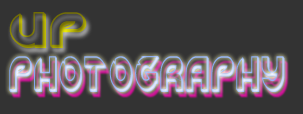
<style>
.page{position:relative;width:303px;height:114px;background:#333333}
.page>*{position:absolute;margin:0}
.t1{font:39.4px "NewDigitalOutline"}
.t2{font:39.4px "NewDigitalOutline";scale:0.64 1}
</style>
<div class="page">
<p class="t1" style="left:9px;top:12px;width:78px;height:36px">up</p>
<p class="t2" style="left:9px;top:56px;width:276px;height:37px">photography</p>
</div>
